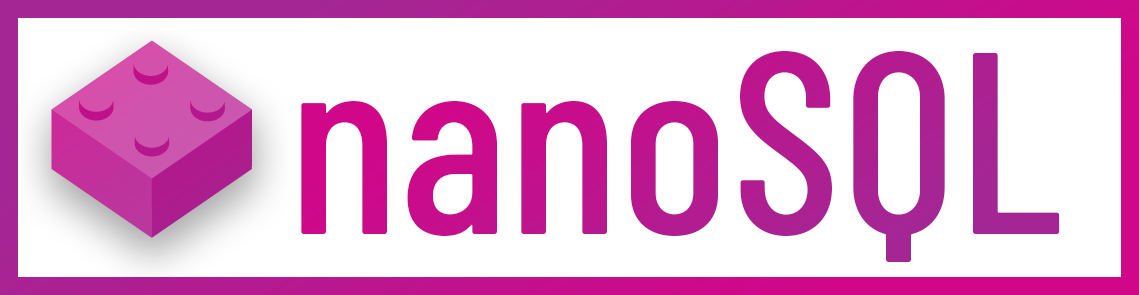
<style>
.page{position:relative;width:1139px;height:295px;background:#ffffff}
.page>*{position:absolute;margin:0}
.t1{font:258px "BarlowCondensed-Medium";color:#ba178f}
</style>
<div class="page">
<p class="t1" style="left:301px;top:50px;width:759px;height:212px">nanoSQL</p>
</div>
